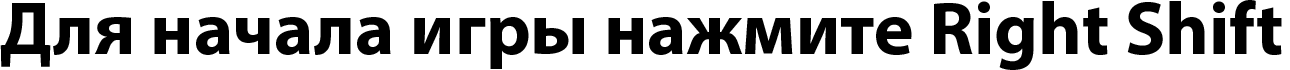
<style>
.page{position:relative;width:1290px;height:70px;background:#ffffff}
.page>*{position:absolute;margin:0}
.t1{font:75px "MyriadPro-Bold";color:#000000}
</style>
<div class="page">
<p class="t1" style="left:0px;top:0px;width:1282px;height:70px">Для начала игры нажмите Right Shift</p>
</div>
